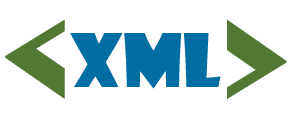
<style>
.page{position:relative;width:291px;height:123px;background:#ffffff}
.page>*{position:absolute;margin:0}
.t1{font:138.8px "Broadway";color:#547834}
.t2{font:72px "ShowcardGothic-Reg";color:#006da3}
</style>
<div class="page">
<p class="t1" style="left:5px;top:19px;width:60px;height:80px">&lt;</p>
<p class="t1" style="left:227px;top:19px;width:60px;height:80px">&gt;</p>
<p class="t2" style="left:70px;top:33px;width:151px;height:56px">XML</p>
</div>
